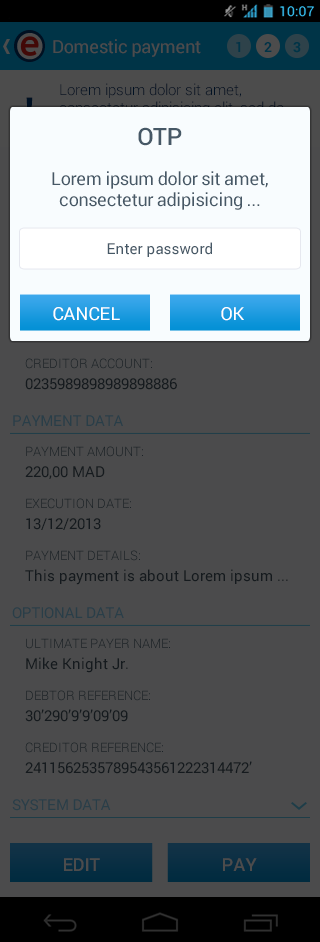
<style>
.page{position:relative;width:320px;height:942px;background:#4b4b4c}
.page>*{position:absolute;margin:0}
.t1{font:18px "Roboto-Regular";letter-spacing:-0.015em;color:#4c4c4c}
.t2{font:14px "Roboto-Bold";color:#003447}
.t3{font:18px/21.6px "Roboto-Regular";letter-spacing:-0.015em;color:#465866}
.t4{font:24px/28.8px "Roboto-Medium";letter-spacing:-0.015em;color:#465866}
.t5{font:15px "Roboto-Regular";color:#465866}
.t6{font:18px "Roboto-Regular";color:#ffffff}
.t7{font:15px "Roboto-Regular";letter-spacing:-0.015em;color:#293e48}
.t8{font:15px/21px "Roboto-Regular";color:#151a1e}
.t9{font:13px/15.6px "Roboto-Light";color:#151a1e}
.t10{font:13px/31.2px "Roboto-Light";color:#151a1e}
.t11{font:15px/18px "Roboto-Regular";color:#151a1e}
.t12{font:18px "Roboto-Medium";color:#4c4c4c}
</style>
<div class="page">
<p class="t1" style="left:53px;top:39px;width:148px;height:18px">Domestic payment</p>
<p class="t2" style="left:236px;top:42px;width:5px;height:10px">1</p>
<p class="t2" style="left:264px;top:42px;width:8px;height:10px">2</p>
<p class="t3" style="left:52px;top:127px;width:216px;height:83px;text-align:center"><span class="t4">OTP<br><br></span>Lorem ipsum dolor sit amet, consectetur adipisicing ...</p>
<p class="t5" style="left:107px;top:242px;width:105px;height:15px">Enter password</p>
<p class="t6" style="left:53px;top:307px;width:67px;height:14px">CANCEL</p>
<p class="t6" style="left:221px;top:307px;width:23px;height:14px">OK</p>
<p class="t7" style="left:13px;top:415px;width:110px;height:11px">PAYMENT DATA</p>
<p class="t8" style="left:25px;top:446px;width:263px;height:139px"><span class="t9">PAYMENT AMOUNT:<br></span>220,00 MAD<br><span class="t10">EXECUTION DATE:<br></span>13/12/2013<br><span class="t10">PAYMENT DETAILS:<br></span>This payment is about Lorem ipsum<span class="t11"> ...</span></p>
<p class="t7" style="left:12px;top:607px;width:112px;height:12px">OPTIONAL DATA</p>
<p class="t8" style="left:25px;top:638px;width:227px;height:136px"><span class="t9">ULTIMATE PAYER NAME:<br></span>Mike Knight Jr.<br><span class="t10">DEBTOR REFERENCE:<br></span>30’290’9’9’09’09<br><span class="t10">CREDITOR REFERENCE:<br></span>2411562535789543561222314472’</p>
<p class="t7" style="left:12px;top:799px;width:99px;height:12px">SYSTEM DATA</p>
<p class="t12" style="left:64px;top:858px;width:36px;height:13px">EDIT</p>
<p class="t12" style="left:223px;top:858px;width:34px;height:13px">PAY</p>
</div>
